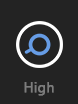
<style>
.page{position:relative;width:78px;height:104px;background:#232323}
.page>*{position:absolute;margin:0}
.t1{font:14px "SegoeUI";color:#7c7c7c;font-weight:bold}
</style>
<div class="page">
<p class="t1" style="left:24px;top:82px;width:30px;height:14px">High</p>
</div>
